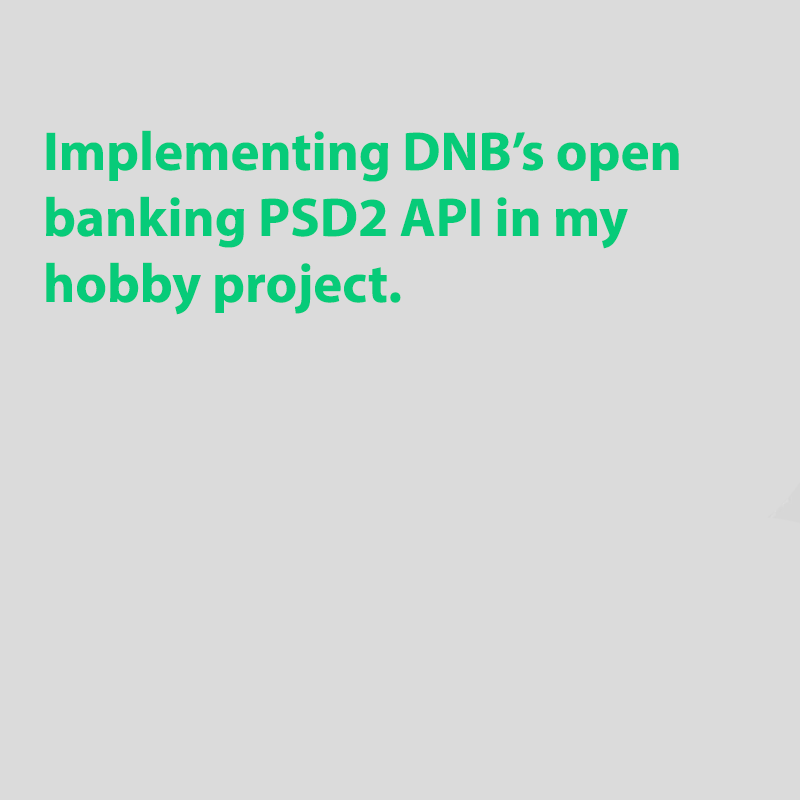
<style>
.page{position:relative;width:800px;height:800px;background:#dbdbdb}
.page>*{position:absolute;margin:0}
.t1{font:55px "MyriadPro-Bold";color:#07cb79}
</style>
<div class="page">
<p class="t1" style="left:46px;top:130px;width:633px;height:185px">Implementing DNB’s open<br>banking PSD2 API in my<br>hobby project.</p>
</div>
